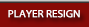
<style>
.page{position:relative;width:89px;height:27px;background:#870a07}
.page>*{position:absolute;margin:0}
.t1{font:10.4px "MyriadPro-Regular";color:#ffffff;scale:1.08 1}
</style>
<div class="page">
<p class="t1" style="left:8px;top:10px;width:72px;height:8px">PLAYER RESIGN</p>
</div>
